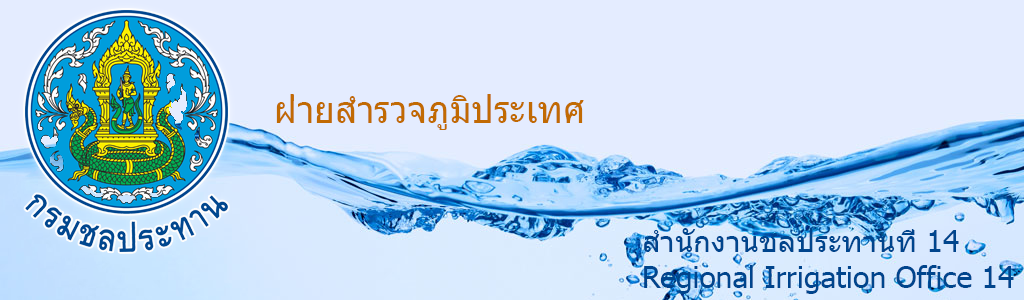
<style>
.page{position:relative;width:1024px;height:300px;background:#e4ecff}
.page>*{position:absolute;margin:0}
.t1{font:36px "Tahoma";color:#c16a03}
.t2{font:30px "Tahoma";color:#00458d}
</style>
<div class="page">
<p class="t1" style="left:276px;top:94px;width:308px;height:36px">ฝ่ายสำรวจภูมิประเทศ</p>
<p class="t2" style="left:644px;top:228px;width:370px;height:66px">สำนักงานชลประทานที่ 14<br>Regional Irrigation Office 14</p>
</div>
